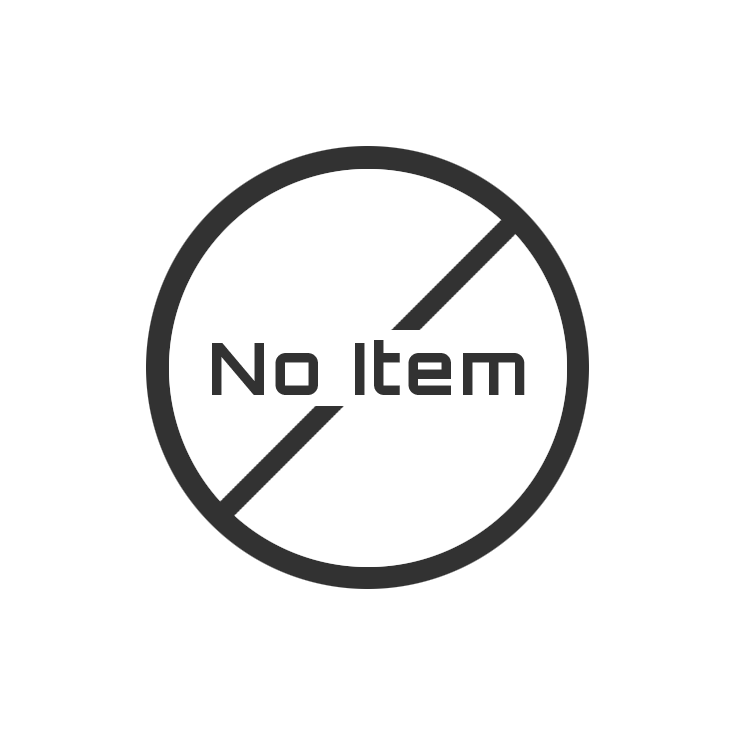
<style>
.page{position:relative;width:736px;height:736px;background:#ffffff}
.page>*{position:absolute;margin:0}
.t1{font:72px "Orbitron-Bold";letter-spacing:0.05em;color:#474747}
</style>
<div class="page">
<p class="t1" style="left:212px;top:340px;width:313px;height:55px">No Item</p>
</div>
